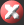
<style>
.page{position:relative;width:24px;height:25px;background:#333333}
.page>*{position:absolute;margin:0}
.t1{font:31.1px "BerlinSansFBDemi-Bold"}
</style>
<div class="page">
<p class="t1" style="left:5px;top:4px;width:15px;height:15px">x</p>
</div>
